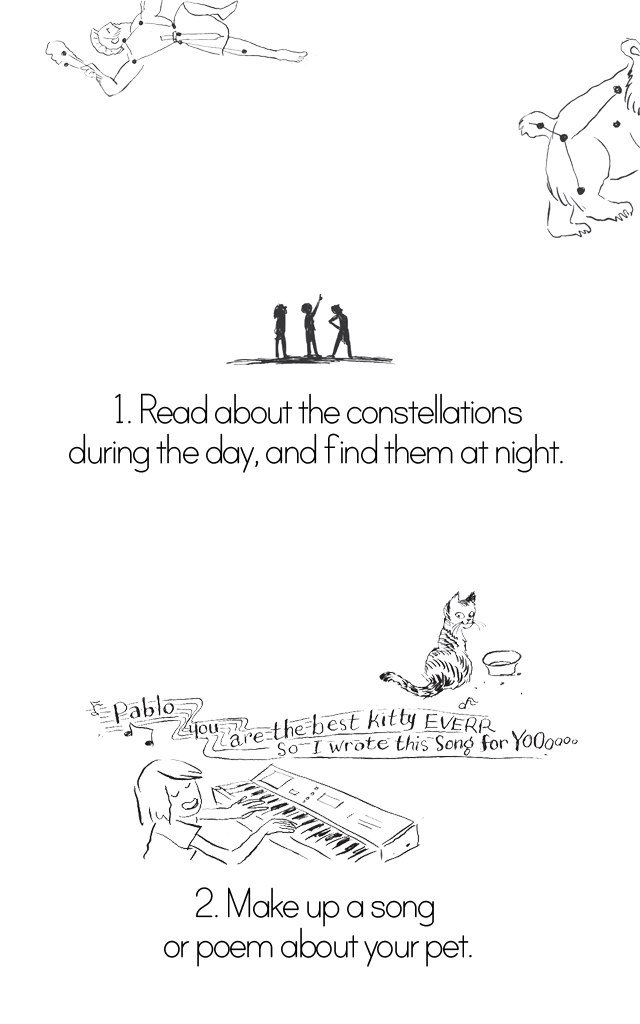
<style>
.page{position:relative;width:640px;height:1024px;background:#ffffff}
.page>*{position:absolute;margin:0}
.t1{font:48px/40px "PrintClearlyOT";letter-spacing:-0.075em;color:#000000}
</style>
<div class="page">
<p class="t1" style="left:69px;top:393px;width:494px;height:80px;text-align:center">1. Read about the constellations<br>during the day, and find them at night.</p>
<p class="t1" style="left:164px;top:887px;width:308px;height:80px;text-align:center">2. Make up a song <br>or poem about your pet.</p>
</div>
